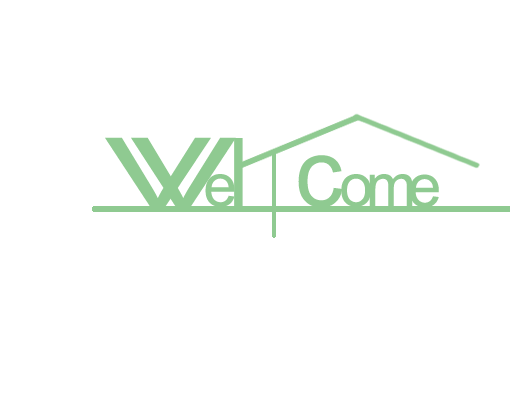
<style>
.page{position:relative;width:510px;height:397px;background:#ffffff}
.page>*{position:absolute;margin:0}
.t1{font:95.2px "ArialMT";color:#8fca91;scale:1.69 1}
.t2{font:95.2px "ArialMT";color:#8fca91;scale:1.68 1}
.t3{font:96px "ArialMT";color:#8fca91}
.t4{font:60px "ArialMT";color:#8fca91}
</style>
<div class="page">
<p class="t1" style="left:105px;top:137px;width:106px;height:70px">V</p>
<p class="t2" style="left:131px;top:137px;width:105px;height:70px">V</p>
<p class="t3" style="left:234px;top:138px;width:9px;height:69px">l</p>
<p class="t3" style="left:298px;top:155px;width:45px;height:53px">c</p>
<p class="t4" style="left:205px;top:174px;width:30px;height:33px">e</p>
<p class="t4" style="left:341px;top:174px;width:30px;height:33px">o</p>
<p class="t4" style="left:369px;top:174px;width:44px;height:32px">m</p>
<p class="t4" style="left:410px;top:174px;width:29px;height:34px">e</p>
</div>
